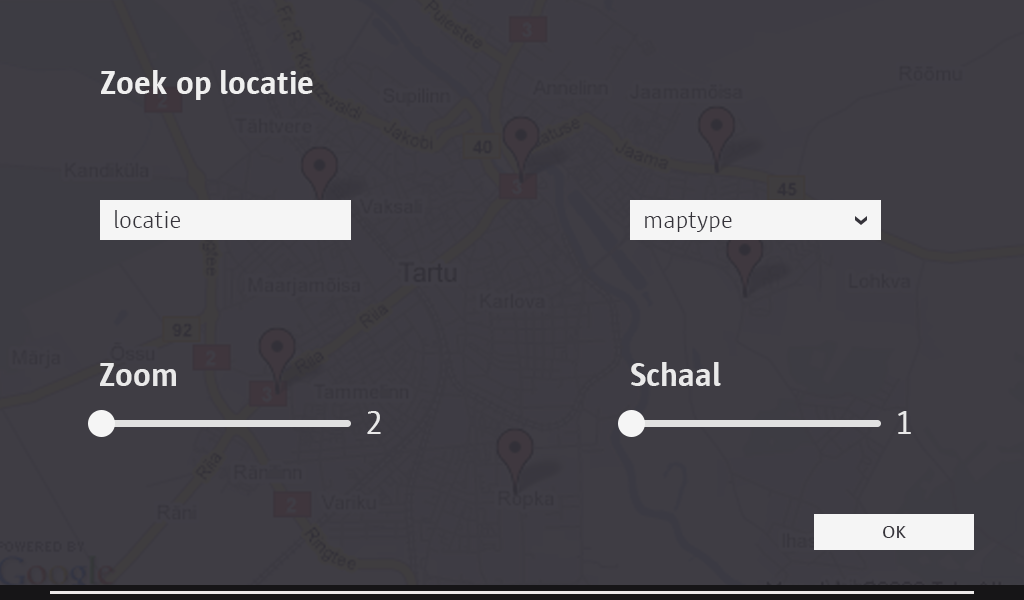
<style>
.page{position:relative;width:1024px;height:600px;background:#3f3d44}
.page>*{position:absolute;margin:0}
.t1{font:33.3px "SunAntwerpen-Bold";color:#efefef}
.t2{font:25px "SunAntwerpen-Light";color:#35333a}
.t3{font:33.1px "SunAntwerpen-Bold";color:#e9e9e9}
.t4{font:33.1px "SunAntwerpen-Regular";color:#e9e9e9}
.t5{font:16.9px "SunAntwerpen-Regular";color:#35333a;scale:1.22 1}
</style>
<div class="page">
<p class="t1" style="left:101px;top:70px;width:212px;height:30px">Zoek op locatie</p>
<p class="t2" style="left:115px;top:210px;width:65px;height:18px">locatie</p>
<p class="t2" style="left:645px;top:212px;width:87px;height:20px">maptype</p>
<p class="t3" style="left:100px;top:363px;width:76px;height:23px">Zoom</p>
<p class="t3" style="left:631px;top:362px;width:90px;height:24px">Schaal</p>
<p class="t4" style="left:367px;top:411px;width:14px;height:23px">2</p>
<p class="t4" style="left:898px;top:411px;width:13px;height:23px">1</p>
<p class="t5" style="left:883px;top:526px;width:23px;height:12px">OK</p>
</div>
